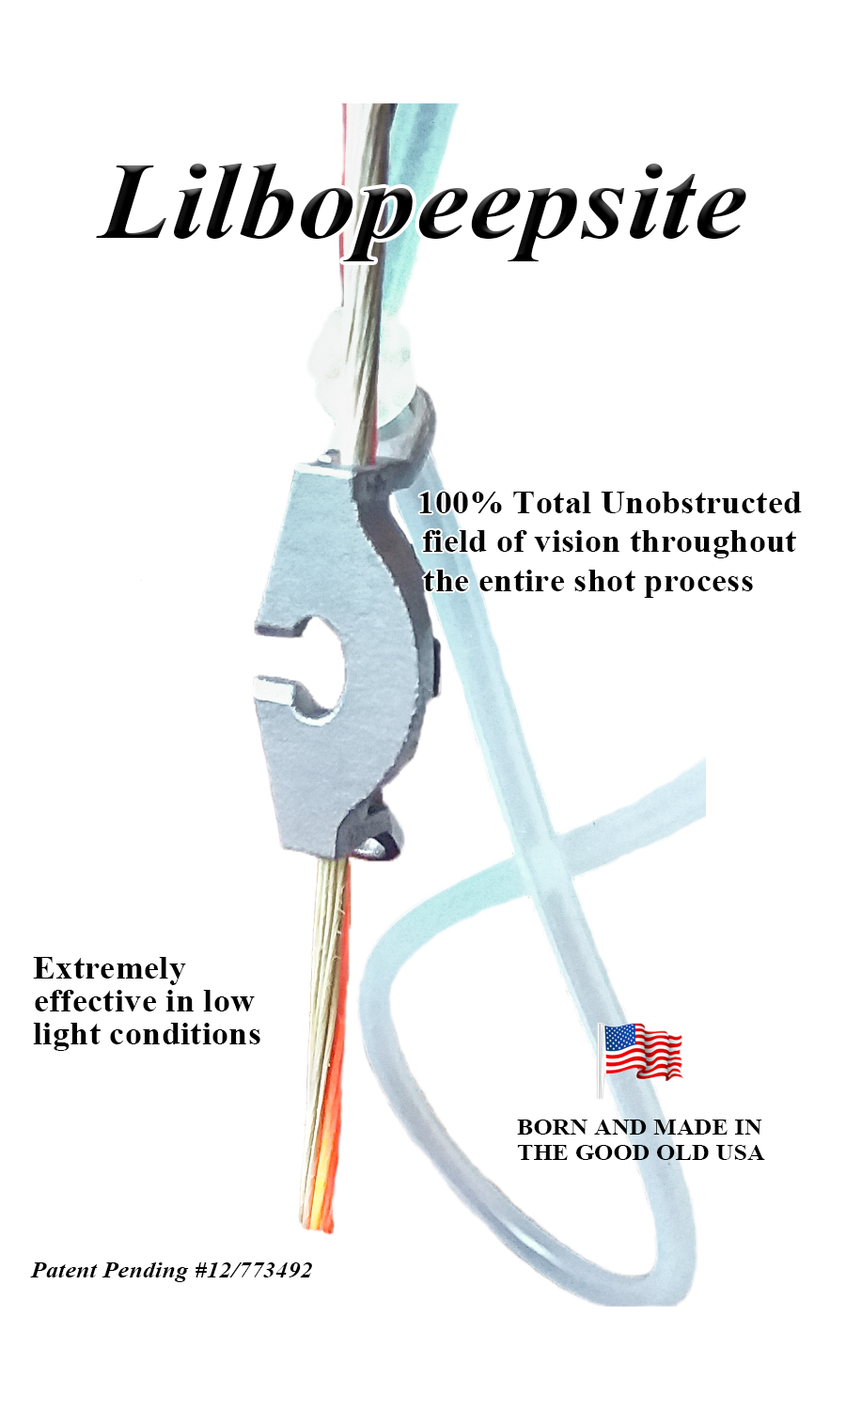
<style>
.page{position:relative;width:846px;height:1410px;background:#ffffff}
.page>*{position:absolute;margin:0}
.t1{font:188px "TimesNewRomanPS-BoldItalicMT";letter-spacing:0.01em;color:#000000;scale:1.06 1}
.t2{font:54.8px "TimesNewRomanPS-BoldMT";letter-spacing:0.01em;color:#000000;scale:1.06 1}
.t3{font:39.2px "TimesNewRomanPS-BoldMT";letter-spacing:0.01em;color:#000000;scale:1.06 1}
.t4{font:39.2px "TimesNewRomanPS-BoldItalicMT";letter-spacing:0.01em;color:#000000;scale:1.06 1}
</style>
<div class="page">
<p class="t1" style="left:96px;top:164px;width:650px;height:97px">Lilbopeepsite</p>
<p class="t2" style="left:419px;top:492px;width:383px;height:21px">100% Total Unobstructed</p>
<p class="t2" style="left:423px;top:530px;width:373px;height:28px">field of vision throughout</p>
<p class="t2" style="left:423px;top:570px;width:330px;height:28px">the entire shot process</p>
<p class="t2" style="left:33px;top:957px;width:153px;height:28px">Extremely</p>
<p class="t2" style="left:35px;top:990px;width:220px;height:21px">effective in low</p>
<p class="t2" style="left:33px;top:1023px;width:227px;height:28px">light conditions</p>
<p class="t3" style="left:517px;top:1119px;width:245px;height:15px">BORN AND MADE IN</p>
<p class="t3" style="left:517px;top:1145px;width:248px;height:15px">THE GOOD OLD USA</p>
<p class="t4" style="left:30px;top:1262px;width:282px;height:20px">Patent Pending #12/773492</p>
</div>
